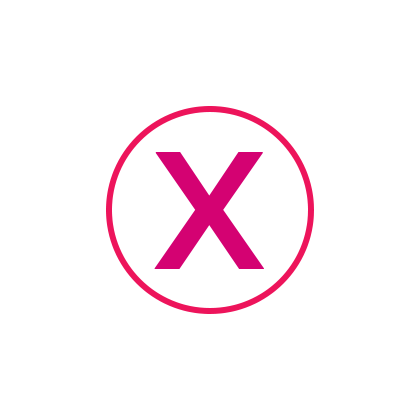
<style>
.page{position:relative;width:420px;height:420px;background:#ffffff}
.page>*{position:absolute;margin:0}
.t1{font:167px "NexaBold";color:#d40272}
</style>
<div class="page">
<p class="t1" style="left:154px;top:152px;width:110px;height:117px">X</p>
</div>
